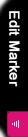
<style>
.page{position:relative;width:28px;height:137px;background:#000000}
.page>*{position:absolute;margin:0}
.t1{font:14px "ArialMT";color:#ffffff;font-weight:bold}
</style>
<div class="page">
<p class="t1" style="left:9px;top:11px;width:11px;height:76px;rotate:90deg">Edit Marker</p>
</div>
